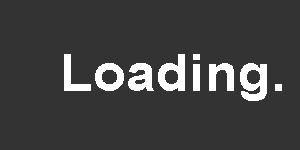
<style>
.page{position:relative;width:300px;height:150px;background:#333333}
.page>*{position:absolute;margin:0}
.t1{font:51.9px "Arial-BoldMT";color:#ffffff;scale:1.05 1}
</style>
<div class="page">
<p class="t1" style="left:64px;top:54px;width:218px;height:47px">Loading.</p>
</div>
